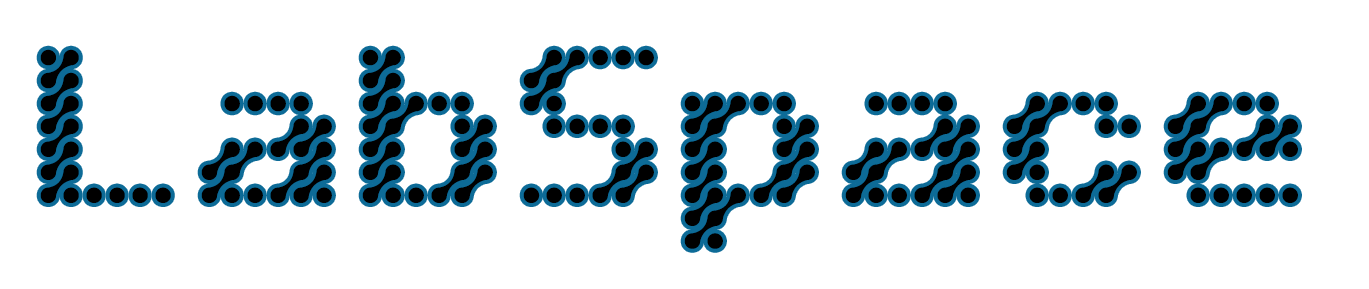
<style>
.page{position:relative;width:1369px;height:289px;background:#ffffff}
.page>*{position:absolute;margin:0}
.t1{font:195.8px "D3-Isotopism";letter-spacing:0.08em;color:#000000}
</style>
<div class="page">
<p class="t1" style="left:40px;top:49px;width:1258px;height:200px">LabSpace</p>
</div>
